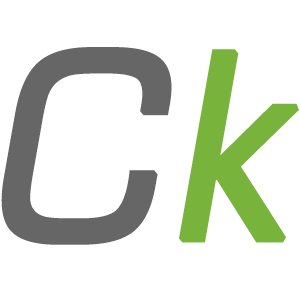
<style>
.page{position:relative;width:300px;height:300px;background:#ffffff}
.page>*{position:absolute;margin:0}
.t1{font:256px "Square721BT-Roman";color:#666666;font-weight:bold;font-style:italic}
.t2{font:256px "Square721BT-Roman";color:#78b43c;font-weight:bold;font-style:italic}
</style>
<div class="page">
<p class="t1" style="left:1px;top:47px;width:298px;height:198px">C<span class="t2">k</span></p>
</div>
